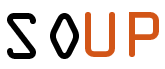
<style>
.page{position:relative;width:165px;height:69px;background:#ffffff}
.page>*{position:absolute;margin:0}
.t1{font:59.8px "OCRAStd";color:#000000}
.t2{font:58px "OCRAStd";color:#d25517;scale:1.05 1}
</style>
<div class="page">
<p class="t1" style="left:7px;top:13px;width:72px;height:46px">SO</p>
<p class="t2" style="left:85px;top:12px;width:74px;height:45px">UP</p>
</div>
